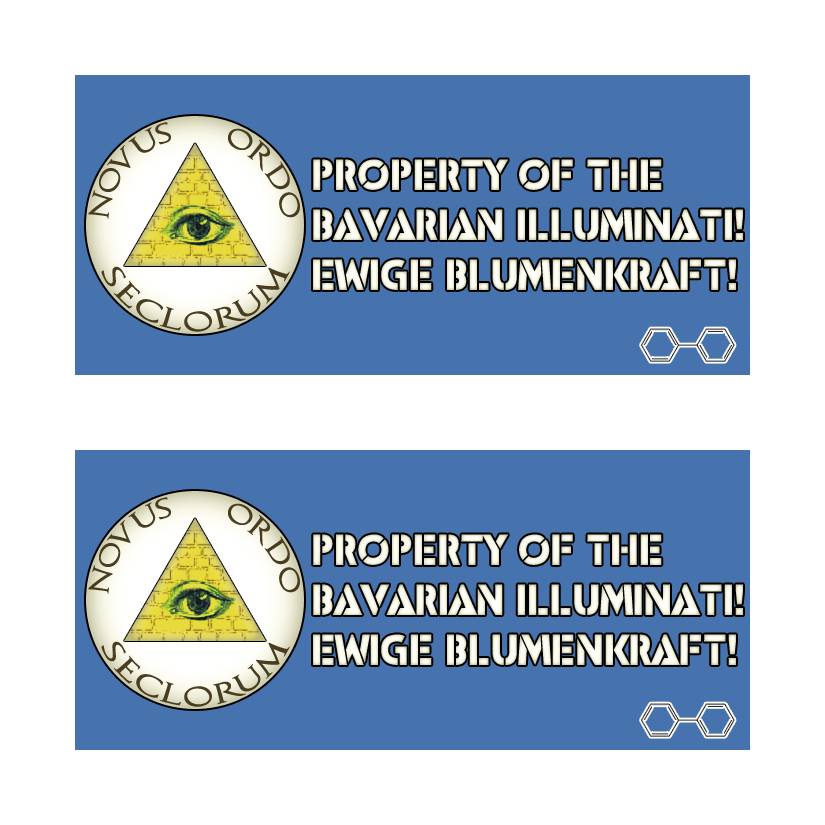
<style>
.page{position:relative;width:825px;height:825px;background:#ffffff}
.page>*{position:absolute;margin:0}
.t1{font:25px "CapitalisTypOasisMedium";color:#493d1f}
.t2{font:41.7px "ICBMSS20";color:#f6f5e6}
</style>
<div class="page">
<p class="t1" style="left:88px;top:122px;width:83px;height:97px;rotate:-51deg">Novus</p>
<p class="t1" style="left:228px;top:128px;width:72px;height:90px;rotate:53deg">Ordo</p>
<p class="t2" style="left:313px;top:159px;width:430px;height:131px">Property of the<br>Bavarian Illuminati!<br>Ewige Blumenkraft!</p>
<p class="t1" style="left:101px;top:266px;width:189px;height:66px;text-align:center">Seclorum</p>
<p class="t1" style="left:88px;top:497px;width:83px;height:97px;rotate:-51deg">Novus</p>
<p class="t1" style="left:228px;top:503px;width:72px;height:90px;rotate:53deg">Ordo</p>
<p class="t2" style="left:313px;top:534px;width:430px;height:131px">Property of the<br>Bavarian Illuminati!<br>Ewige Blumenkraft!</p>
<p class="t1" style="left:101px;top:641px;width:189px;height:66px;text-align:center">Seclorum</p>
</div>
